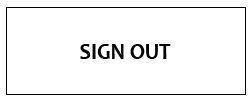
<style>
.page{position:relative;width:250px;height:100px;background:#ffffff}
.page>*{position:absolute;margin:0}
.t1{font:24px "Candara-Bold";color:#000000;scale:0.91 1}
</style>
<div class="page">
<p class="t1" style="left:80px;top:44px;width:91px;height:15px">SIGN OUT</p>
</div>
